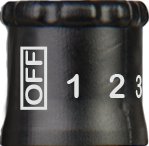
<style>
.page{position:relative;width:149px;height:146px}
.page>*{position:absolute;margin:0}
.t1{font:23.4px "ArialRoundedMTBold";letter-spacing:-0.01em;color:#e1e4e3;scale:1.23 1}
.t2{font:33.3px "ArialRoundedMTBold";letter-spacing:-0.01em;color:#e1e4e3}
.t3{font:32.5px "ArialRoundedMTBold";letter-spacing:-0.01em;color:#e1e4e3;scale:0.93 1}
.t4{font:32.5px "ArialRoundedMTBold";letter-spacing:-0.01em;color:#e1e4e3;scale:0.36 1}
</style>
<div class="page">
<p class="t1" style="left:25px;top:50px;width:18px;height:55px;rotate:-90deg">OFF</p>
<p class="t2" style="left:67px;top:74px;width:12px;height:24px">1</p>
<p class="t3" style="left:109px;top:74px;width:16px;height:24px">2</p>
<p class="t4" style="left:135px;top:75px;width:7px;height:23px">3</p>
</div>
